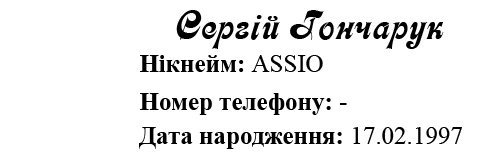
<style>
.page{position:relative;width:480px;height:160px;background:#ffffff}
.page>*{position:absolute;margin:0}
.t1{font:41.7px "Asessor";color:#000000}
.t2{font:25px "TimesNewRomanPS-BoldMT";color:#000000}
.t3{font:25px "TimesNewRomanPSMT";color:#000000}
</style>
<div class="page">
<p class="t1" style="left:176px;top:10px;width:268px;height:39px">Сергій Гончарук</p>
<p class="t2" style="left:140px;top:55px;width:183px;height:17px">Нікнейм: <span class="t3">ASSIO</span></p>
<p class="t2" style="left:140px;top:93px;width:207px;height:22px">Номер телефону: <span class="t3">-</span></p>
<p class="t2" style="left:139px;top:127px;width:323px;height:22px">Дата народження: <span class="t3">17.02.1997</span></p>
</div>
